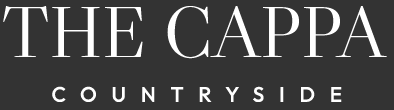
<style>
.page{position:relative;width:394px;height:110px;background:#333333}
.page>*{position:absolute;margin:0}
.t1{font:72px "LibreCaslonDisplay-Regular";color:#ffffff}
.t2{font:21px "Outfit-Medium";letter-spacing:0.7em;color:#ffffff;text-transform:uppercase}
</style>
<div class="page">
<p class="t1" style="left:3px;top:6px;width:384px;height:53px">THE CAPPA</p>
<p class="t2" style="left:52px;top:86px;width:290px;height:16px">Countryside</p>
</div>
